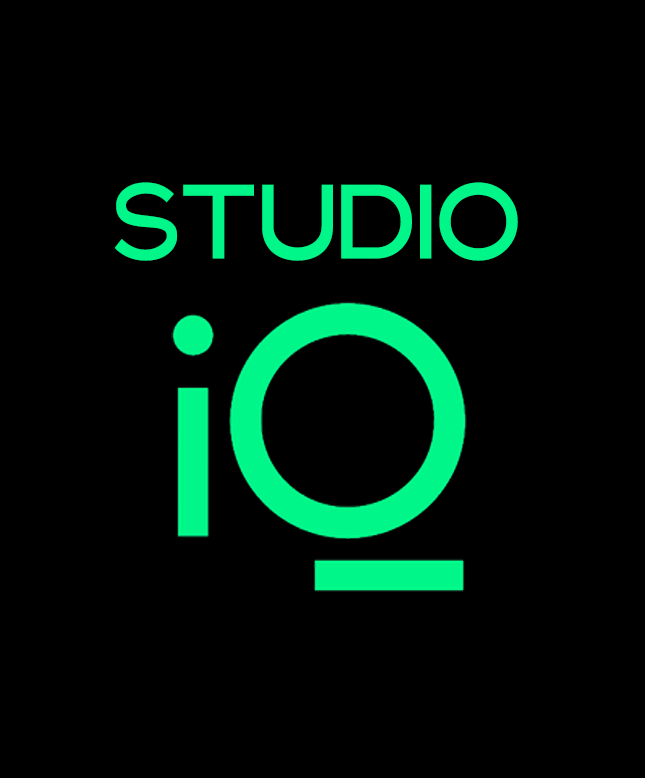
<style>
.page{position:relative;width:645px;height:778px;background:#000000}
.page>*{position:absolute;margin:0}
.t1{font:100.8px "Bristone-Thin";color:#00f688;scale:0.86 1}
</style>
<div class="page">
<p class="t1" style="left:115px;top:182px;width:403px;height:79px">STUDIO</p>
</div>
